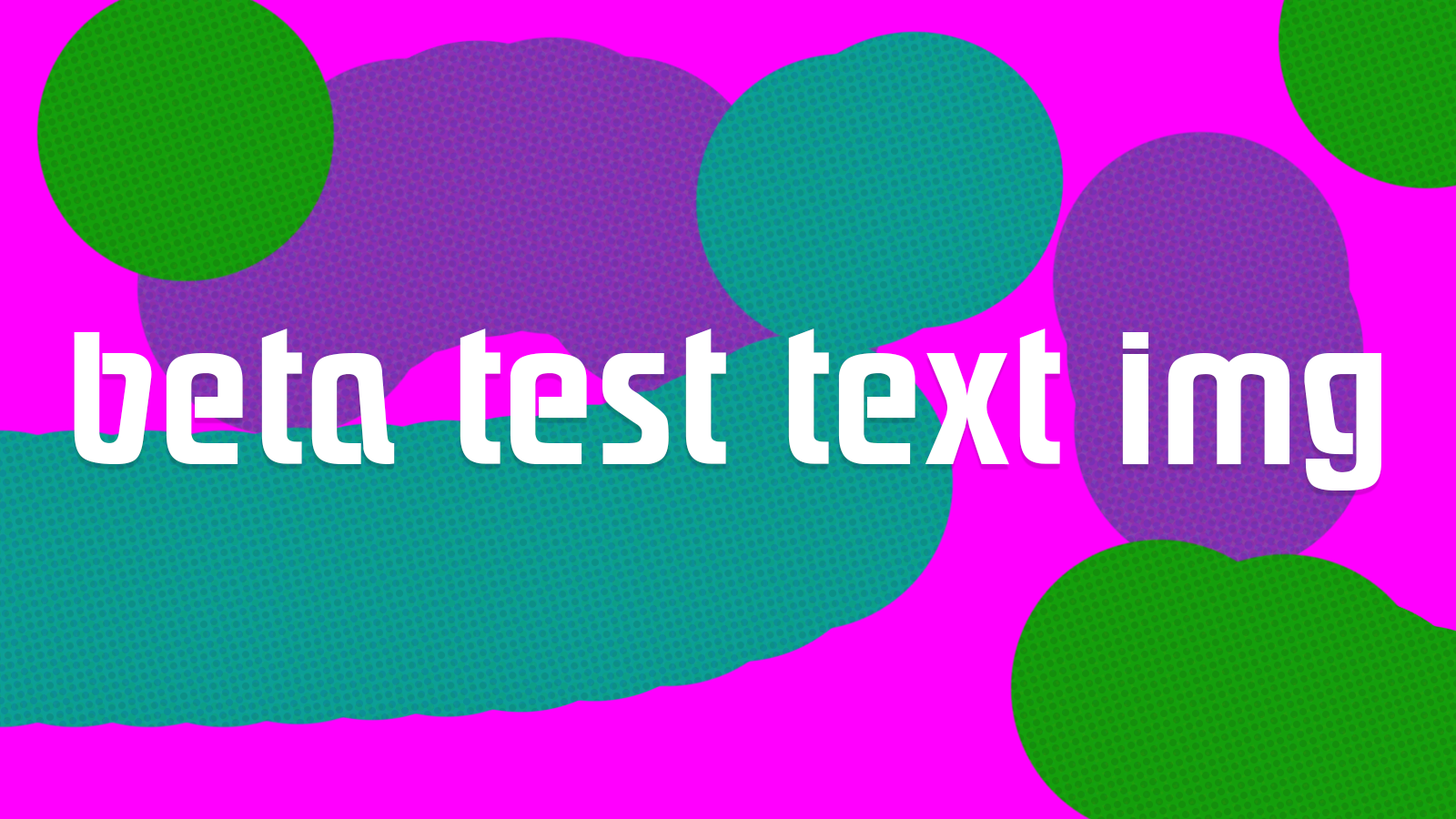
<style>
.page{position:relative;width:1456px;height:819px;background:#ff00fe}
.page>*{position:absolute;margin:0}
.t1{font:182.6px "PhrasticMedium";color:#ffffff}
</style>
<div class="page">
<p class="t1" style="left:74px;top:329px;width:1307px;height:161px">beta test text img</p>
</div>
